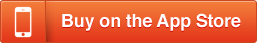
<style>
.page{position:relative;width:257px;height:43px}
.page>*{position:absolute;margin:0}
.t1{font:18px "Helvetica-Bold";letter-spacing:-0.01em;color:#ffffff}
</style>
<div class="page">
<p class="t1" style="left:62px;top:13px;width:179px;height:18px">Buy on the App Store</p>
</div>
